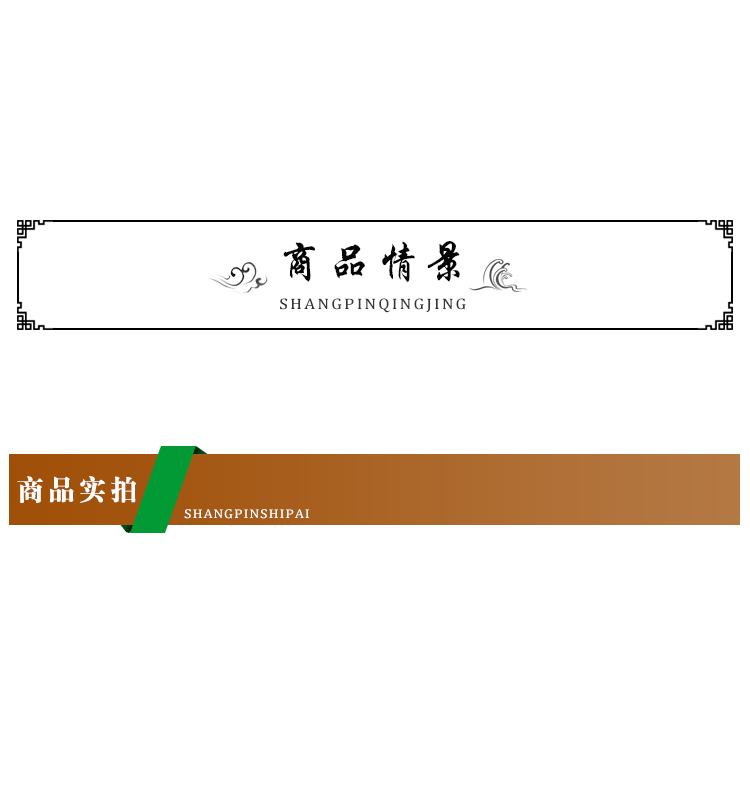
<style>
.page{position:relative;width:750px;height:800px;background:#ffffff}
.page>*{position:absolute;margin:0}
.t1{font:46.7px "HYi1gf";letter-spacing:0.05em;color:#000000}
.t2{font:20px "Cambria";letter-spacing:0.1em;color:#343434;font-variant:small-caps}
.t3{font:28.3px "HYa9gj";letter-spacing:0.1em;color:#ffffff;font-variant:small-caps}
.t4{font:16.7px "Cambria";letter-spacing:0.05em;color:#ffffff;font-variant:small-caps}
</style>
<div class="page">
<p class="t1" style="left:283px;top:241px;width:177px;height:41px">商品情景</p>
<p class="t2" style="left:280px;top:298px;width:186px;height:15px">shangpinqingjing</p>
<p class="t3" style="left:17px;top:476px;width:119px;height:27px">商品实拍</p>
<p class="t4" style="left:184px;top:509px;width:125px;height:10px">shangpinshipai</p>
</div>
